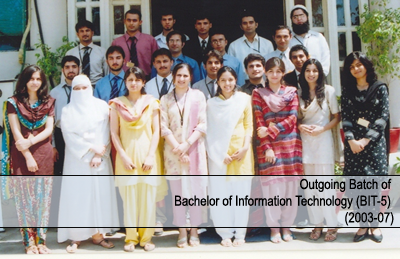
<style>
.page{position:relative;width:400px;height:259px}
.page>*{position:absolute;margin:0}
.t1{font:13.9px "ArialNarrow";color:#000000}
</style>
<div class="page">
<p class="t1" style="left:175px;top:178px;width:219px;height:48px;text-align:right">Outgoing Batch of <br>Bachelor of Information Technology (BIT-5) <br>(2003-07)</p>
</div>
